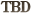
<style>
.page{position:relative;width:42px;height:13px;background:#ffffff}
.page>*{position:absolute;margin:0}
.t1{font:15px "RyuminPro-ExBold";letter-spacing:-0.06em;color:#4a3f32;font-weight:bold;scale:0.9 1}
</style>
<div class="page">
<p class="t1" style="left:0px;top:1px;width:31px;height:12px">TBD</p>
</div>
